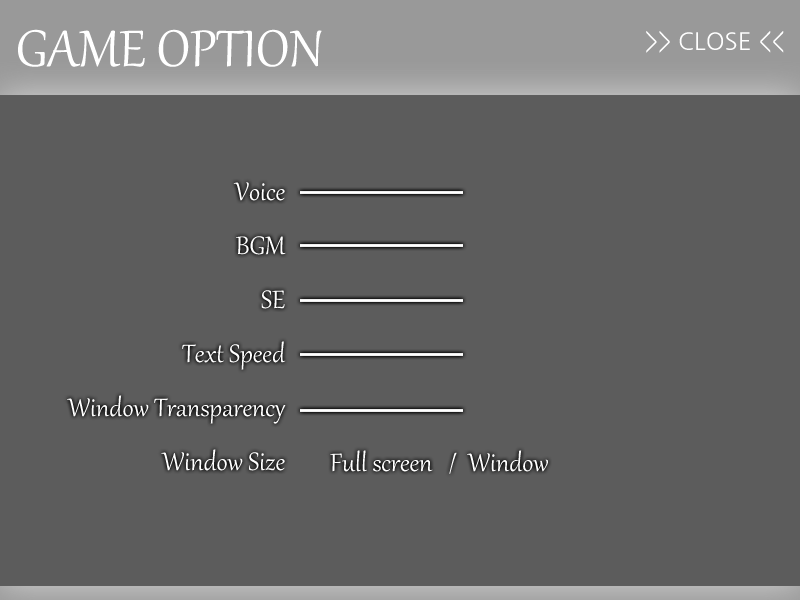
<style>
.page{position:relative;width:800px;height:600px;background:#5c5c5c}
.page>*{position:absolute;margin:0}
.t1{font:63px "Gabriola";color:#ffffff}
.t2{font:24px "NanumGothic";color:#ffffff}
.t3{font:31px/54px "Gabriola";color:#ffffff}
.t4{font:31px "Gabriola";color:#ffffff}
</style>
<div class="page">
<p class="t1" style="left:18px;top:29px;width:304px;height:38px">GAME OPTION</p>
<p class="t2" style="left:646px;top:31px;width:138px;height:22px">&gt;&gt; CLOSE &lt;&lt;</p>
<p class="t3" style="left:67px;top:182px;width:219px;height:289px;text-align:right">Voice<br>BGM<br>SE<br>Text Speed<br>Window Transparency<br>Window Size</p>
<p class="t4" style="left:330px;top:450px;width:218px;height:24px">Full screen   /  Window</p>
</div>
